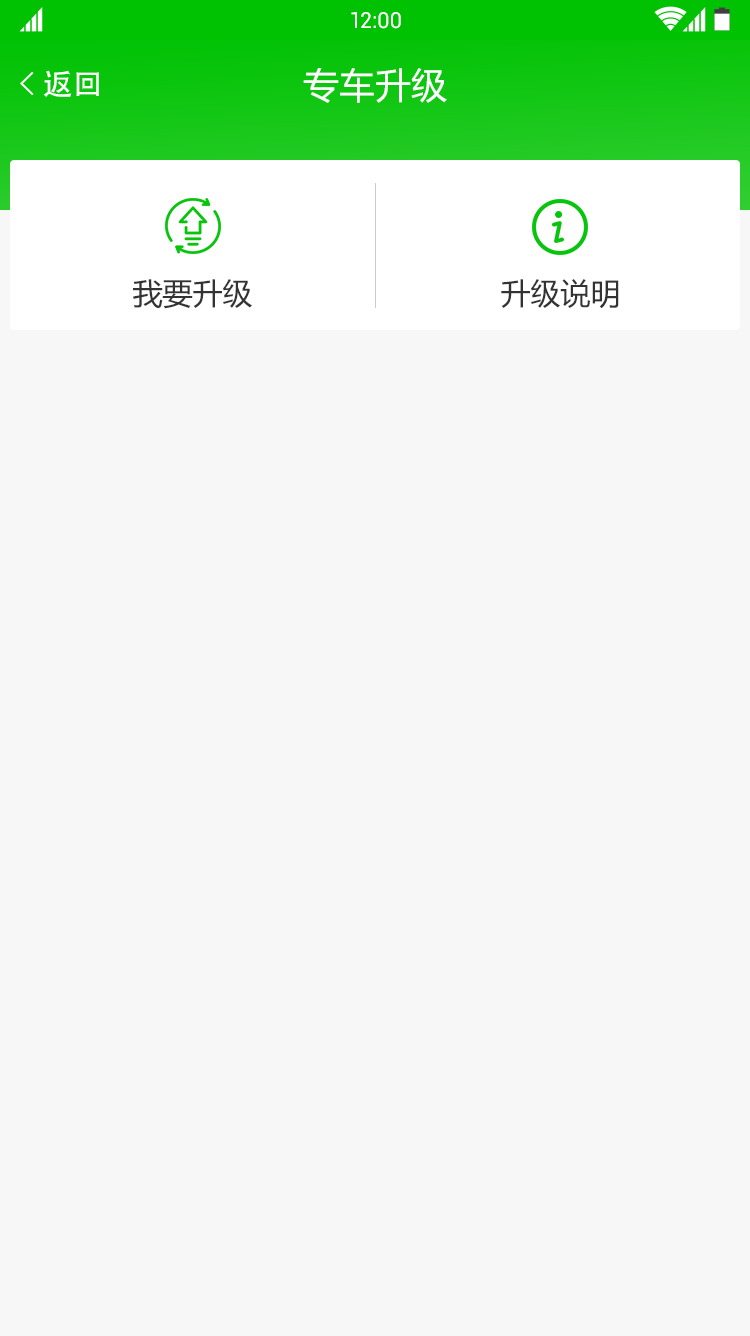
<style>
.page{position:relative;width:750px;height:1336px;background:#f7f7f7}
.page>*{position:absolute;margin:0}
.t1{font:22px "Roboto-Regular";color:#ffffff}
.t2{font:30px "AdobeHeitiStd-Regular";color:#ffffff}
.t3{font:36px "MicrosoftYaHei";color:#ffffff}
.t4{font:30px "MicrosoftYaHei";color:#333333}
</style>
<div class="page">
<p class="t1" style="left:351px;top:12px;width:50px;height:17px">12:00</p>
<p class="t2" style="left:43px;top:70px;width:56px;height:27px">返回</p>
<p class="t3" style="left:303px;top:68px;width:144px;height:35px">专车升级</p>
<p class="t4" style="left:133px;top:279px;width:119px;height:30px">我要升级</p>
<p class="t4" style="left:501px;top:279px;width:118px;height:30px">升级说明</p>
</div>
